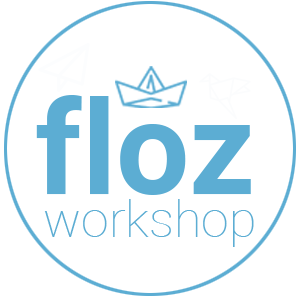
<style>
.page{position:relative;width:300px;height:300px;background:#ffffff}
.page>*{position:absolute;margin:0}
.t1{font:130px "Roboto-Bold";color:#5cadd3}
.t2{font:50px "Roboto-Thin";color:#5cadd3}
</style>
<div class="page">
<p class="t1" style="left:36px;top:95px;width:215px;height:100px">floz</p>
<p class="t2" style="left:44px;top:199px;width:210px;height:48px">workshop</p>
</div>
